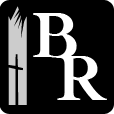
<style>
.page{position:relative;width:114px;height:114px;background:#000000}
.page>*{position:absolute;margin:0}
.t1{font:67.4px "Cochin-Bold";color:#ffffff}
</style>
<div class="page">
<p class="t1" style="left:33px;top:13px;width:44px;height:45px">B</p>
<p class="t1" style="left:57px;top:56px;width:50px;height:44px">R</p>
</div>
